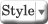
<style>
.page{position:relative;width:48px;height:24px;background:#ffffff}
.page>*{position:absolute;margin:0}
.t1{font:14px "Century";color:#333333}
.t2{font:8px "Gulim";letter-spacing:-0.14em;color:#666666}
</style>
<div class="page">
<p class="t1" style="left:2px;top:4px;width:33px;height:14px">Style</p>
<p class="t2" style="left:38px;top:9px;width:7px;height:6px">▼</p>
</div>
